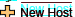
<style>
.page{position:relative;width:75px;height:17px;background:#ffffff}
.page>*{position:absolute;margin:0}
.t1{font:12px "ArialMT"}
</style>
<div class="page">
<p class="t1" style="left:21px;top:4px;width:52px;height:9px">New Host</p>
</div>
